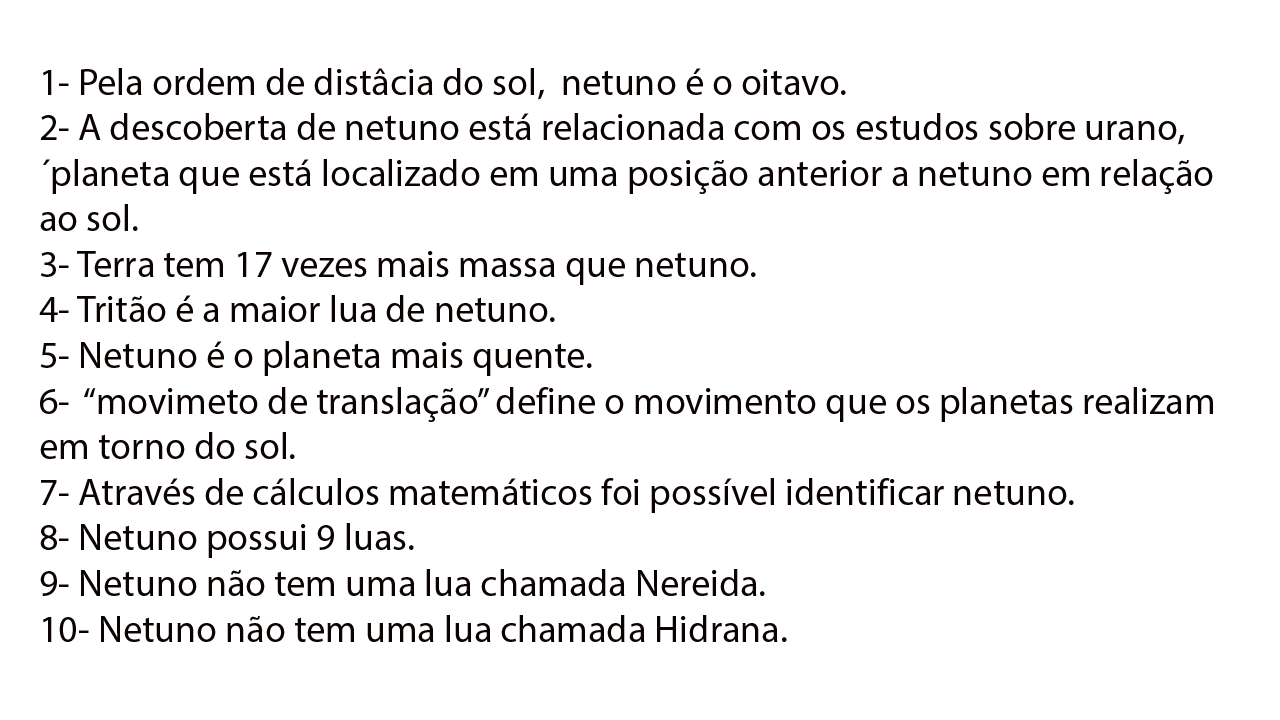
<style>
.page{position:relative;width:1280px;height:720px;background:#ffffff}
.page>*{position:absolute;margin:0}
.t1{font:38px "MyriadPro-Regular";color:#0b0202}
</style>
<div class="page">
<p class="t1" style="left:39px;top:68px;width:1174px;height:574px">1- Pela ordem de distâcia do sol,  netuno é o oitavo.<br>2- A descoberta de netuno está relacionada com os estudos sobre urano,<br>´planeta que está localizado em uma posição anterior a netuno em relação<br>ao sol.<br>3- Terra tem 17 vezes mais massa que netuno.<br>4- Tritão é a maior lua de netuno.<br>5- Netuno é o planeta mais quente.<br>6-  “movimeto de translação” define o movimento que os planetas realizam<br>em torno do sol.<br>7- Através de cálculos matemáticos foi possível identificar netuno.<br>8- Netuno possui 9 luas.<br>9- Netuno não tem uma lua chamada Nereida.<br>10- Netuno não tem uma lua chamada Hidrana.</p>
</div>
